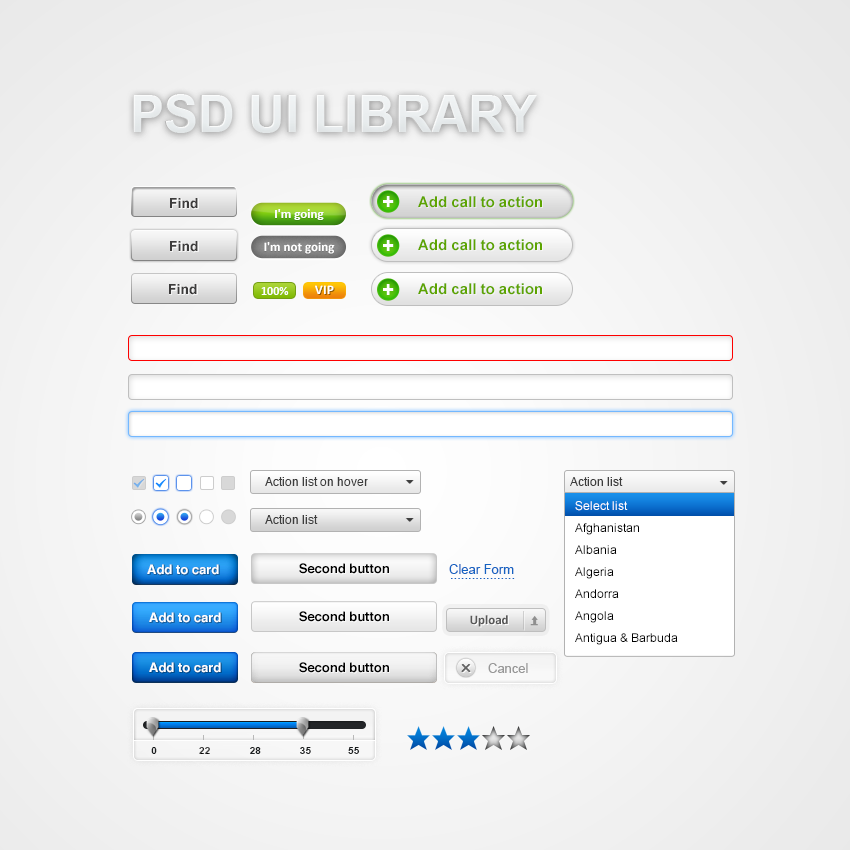
<style>
.page{position:relative;width:850px;height:850px}
.page>*{position:absolute;margin:0}
.t1{font:14px "Arial-BoldMT";color:#3d3c3c}
.t2{font:20px "Arial-BoldMT";color:#ffffff}
.t3{font:15px "Arial-BoldMT";color:#5da400}
.t4{font:13px "Calibri-Bold";color:#ffffff}
.t5{font:12px "Calibri-Bold";color:#ffffff}
.t6{font:13px "Calibri-Bold";letter-spacing:0.02em;color:#ffffff}
.t7{font:12px "Helvetica";color:#3d3d3d}
.t8{font:12px "ArialMT";color:#3d3d3d}
.t9{font:12px/22px "ArialMT";color:#000000}
.t10{font:12px "ArialMT";color:#ffffff}
.t11{font:13px "Helvetica-Bold";color:#ffffff}
.t12{font:13px "Helvetica-Bold";color:#000000}
.t13{font:13px "ArialMT";color:#1663c2}
.t14{font:13px "Calibri-Bold";color:#575757}
.t15{font:13px "ArialMT";color:#979797}
.t16{font:10px "Arial-BoldMT";letter-spacing:0.005em;color:#1c1e20}
.t17{font:10px "Arial-BoldMT";letter-spacing:0.005em}
.t18{font:10px "Arial-BoldMT";letter-spacing:0.005em;color:#1b1e1f}
.t19{font:10px "Arial-BoldMT";letter-spacing:0.005em;color:#181b1c}
</style>
<div class="page">
<p class="t1" style="left:170px;top:198px;width:28px;height:11px">Find</p>
<p class="t2" style="left:383px;top:196px;width:11px;height:11px">+</p>
<p class="t3" style="left:418px;top:196px;width:124px;height:12px">Add call to action</p>
<p class="t4" style="left:275px;top:209px;width:49px;height:11px">I'm going</p>
<p class="t1" style="left:170px;top:241px;width:28px;height:11px">Find</p>
<p class="t4" style="left:264px;top:242px;width:71px;height:12px">I'm not going</p>
<p class="t2" style="left:383px;top:240px;width:11px;height:11px">+</p>
<p class="t3" style="left:418px;top:239px;width:124px;height:12px">Add call to action</p>
<p class="t1" style="left:169px;top:284px;width:28px;height:11px">Find</p>
<p class="t5" style="left:261px;top:287px;width:28px;height:8px">100%</p>
<p class="t6" style="left:315px;top:285px;width:19px;height:9px">VIP</p>
<p class="t2" style="left:383px;top:284px;width:11px;height:11px">+</p>
<p class="t3" style="left:418px;top:283px;width:124px;height:12px">Add call to action</p>
<p class="t7" style="left:265px;top:477px;width:103px;height:9px">Action list on hover</p>
<p class="t8" style="left:570px;top:477px;width:53px;height:9px">Action list</p>
<p class="t9" style="left:575px;top:501px;width:103px;height:144px"><span class="t10">Select list<br></span>Afghanistan <br>Albania <br>Algeria <br>Andorra <br>Angola <br>Antigua &amp; Barbuda</p>
<p class="t7" style="left:265px;top:515px;width:53px;height:9px">Action list</p>
<p class="t11" style="left:147px;top:564px;width:72px;height:11px">Add to card</p>
<p class="t12" style="left:299px;top:563px;width:90px;height:11px">Second button</p>
<p class="t13" style="left:449px;top:564px;width:65px;height:10px">Clear Form</p>
<p class="t13" style="left:451px;top:578px;width:64px;height:1px">..................</p>
<p class="t11" style="left:149px;top:612px;width:72px;height:11px">Add to card</p>
<p class="t12" style="left:299px;top:611px;width:90px;height:11px">Second button</p>
<p class="t14" style="left:470px;top:615px;width:38px;height:12px">Upload</p>
<p class="t11" style="left:149px;top:662px;width:72px;height:11px">Add to card</p>
<p class="t12" style="left:299px;top:662px;width:90px;height:11px">Second button</p>
<p class="t15" style="left:488px;top:663px;width:40px;height:10px">Cancel</p>
<p class="t16" style="left:151px;top:747px;width:6px;height:7px">0</p>
<p class="t17" style="left:199px;top:747px;width:11px;height:7px">22</p>
<p class="t18" style="left:250px;top:747px;width:11px;height:7px">28</p>
<p class="t19" style="left:300px;top:747px;width:11px;height:7px">35</p>
<p class="t16" style="left:348px;top:747px;width:12px;height:7px">55</p>
</div>
